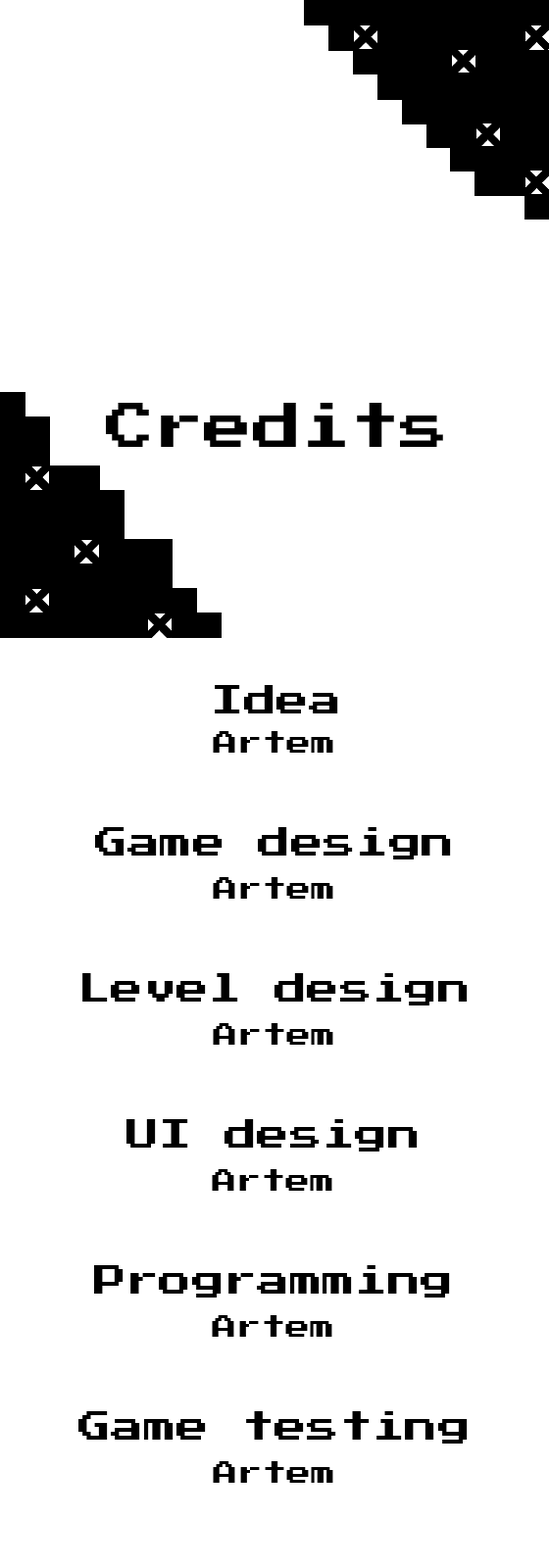
<style>
.page{position:relative;width:549px;height:1568px;background:#ffffff}
.page>*{position:absolute;margin:0}
.t1{font:49px "PressStart2P-Regular";color:#000000}
.t2{font:32.7px "PressStart2P-Regular";color:#000000}
.t3{font:24.5px "PressStart2P-Regular";color:#000000}
</style>
<div class="page">
<p class="t1" style="left:106px;top:403px;width:337px;height:44px">Credits</p>
<p class="t2" style="left:215px;top:685px;width:123px;height:28px">Idea</p>
<p class="t3" style="left:213px;top:731px;width:120px;height:22px">Artem</p>
<p class="t2" style="left:95px;top:827px;width:356px;height:32px">Game design</p>
<p class="t3" style="left:213px;top:877px;width:120px;height:22px">Artem</p>
<p class="t2" style="left:82px;top:973px;width:385px;height:32px">Level design</p>
<p class="t3" style="left:213px;top:1023px;width:120px;height:22px">Artem</p>
<p class="t2" style="left:126px;top:1119px;width:291px;height:33px">UI design</p>
<p class="t3" style="left:212px;top:1169px;width:120px;height:22px">Artem</p>
<p class="t2" style="left:94px;top:1265px;width:356px;height:33px">Programming</p>
<p class="t3" style="left:212px;top:1315px;width:120px;height:22px">Artem</p>
<p class="t2" style="left:78px;top:1411px;width:389px;height:33px">Game testing</p>
<p class="t3" style="left:213px;top:1461px;width:120px;height:22px">Artem</p>
</div>
